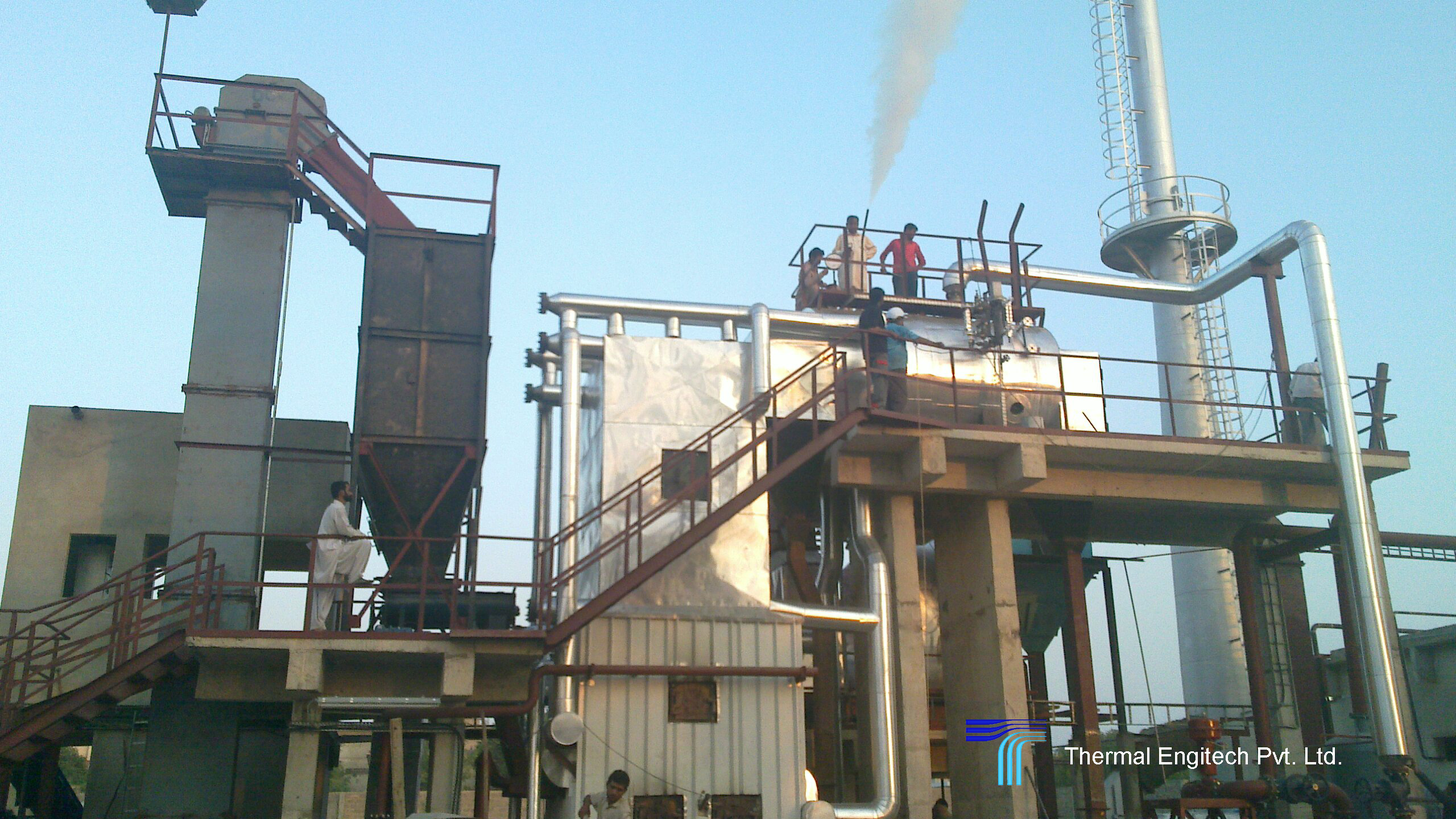
<style>
.page{position:relative;width:1456px;height:819px}
.page>*{position:absolute;margin:0}
.t1{font:23.7px "ArialMT";color:#fefefe}
</style>
<div class="page">
<p class="t1" style="left:1065px;top:747px;width:276px;height:22px">Thermal Engitech Pvt. Ltd.</p>
</div>
